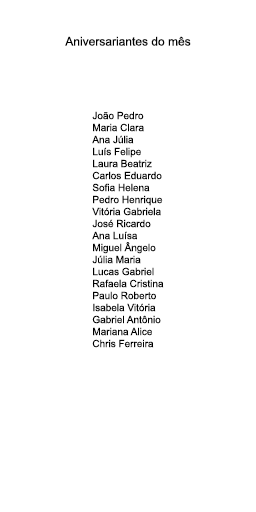
<style>
.page{position:relative;width:256px;height:512px;background:#ffffff}
.page>*{position:absolute;margin:0}
.t1{font:12px "ArialMT";color:#000000}
.t2{font:10px "ArialMT";color:#000000}
</style>
<div class="page">
<p class="t1" style="left:65px;top:36px;width:126px;height:10px">Aniversariantes do mês</p>
<p class="t2" style="left:92px;top:111px;width:72px;height:237px">João Pedro<br>Maria Clara<br>Ana Júlia<br>Luís Felipe<br>Laura Beatriz<br>Carlos Eduardo<br>Sofia Helena<br>Pedro Henrique<br>Vitória Gabriela<br>José Ricardo<br>Ana Luísa<br>Miguel Ângelo<br>Júlia Maria<br>Lucas Gabriel<br>Rafaela Cristina<br>Paulo Roberto<br>Isabela Vitória<br>Gabriel Antônio<br>Mariana Alice<br>Chris Ferreira</p>
</div>
